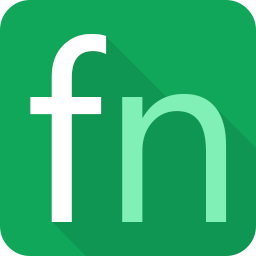
<style>
.page{position:relative;width:256px;height:256px;background:#10a75b}
.page>*{position:absolute;margin:0}
.t1{font:250px "SegoeUI";color:#ffffff}
.t2{font:250px "SegoeUI";color:#80f0b7}
</style>
<div class="page">
<p class="t1" style="left:30px;top:34px;width:197px;height:188px">f<span class="t2">n</span></p>
</div>
